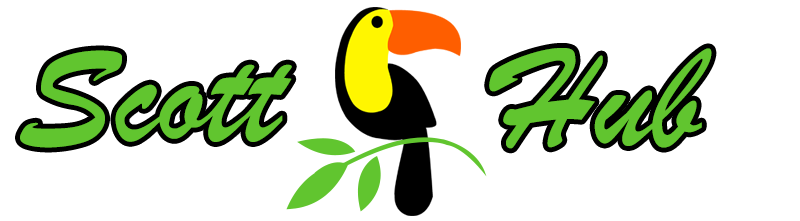
<style>
.page{position:relative;width:800px;height:221px;background:#ffffff}
.page>*{position:absolute;margin:0}
.t1{font:150px "BrushScriptMT";color:#61c52f}
</style>
<div class="page">
<p class="t1" style="left:20px;top:50px;width:272px;height:98px">Scott</p>
<p class="t1" style="left:489px;top:48px;width:223px;height:101px">Hub</p>
</div>
